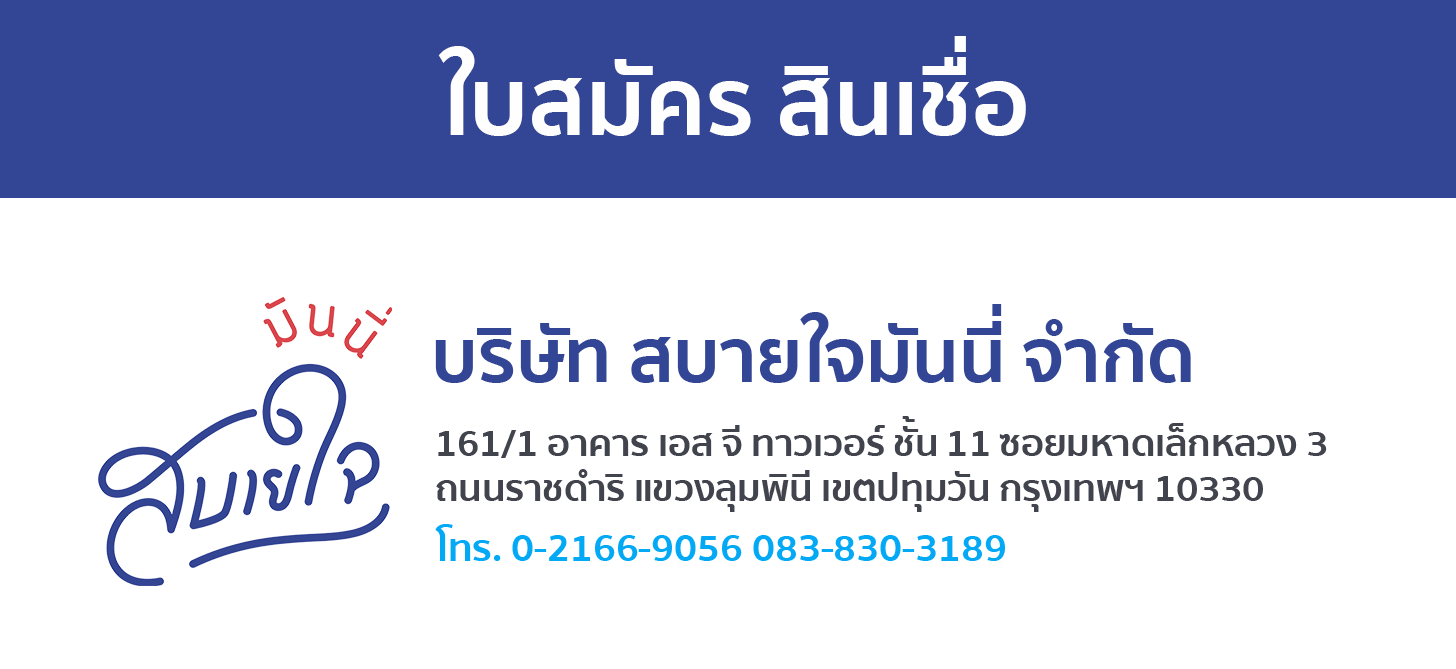
<style>
.page{position:relative;width:1456px;height:669px;background:#ffffff}
.page>*{position:absolute;margin:0}
.t1{font:95.5px "SukhumvitSet-Bold";color:#fefeff}
.t2{font:75.1px "SukhumvitSet-Bold";color:#324695}
.t3{font:37.5px "SukhumvitSet-Bold";color:#41434d}
.t4{font:38.8px "SukhumvitSet-Bold";color:#03a9f4}
</style>
<div class="page">
<p class="t1" style="left:438px;top:36px;width:588px;height:100px">ใบสมัคร สินเชื่อ</p>
<p class="t2" style="left:435px;top:304px;width:756px;height:79px">บริษัท สบายใจมันนี่ จํากัด</p>
<p class="t3" style="left:436px;top:416px;width:891px;height:96px">161/1 อาคาร เอส จี ทาวเวอร์ ชั้น 11 ซอยมหาดเล็กหลวง 3<br>ถนนราชดําริ แขวงลุมพินี เขตปทุมวัน กรุงเทพฯ 10330</p>
<p class="t4" style="left:435px;top:524px;width:570px;height:37px">โทร. 0-2166-9056 083-830-3189</p>
</div>
